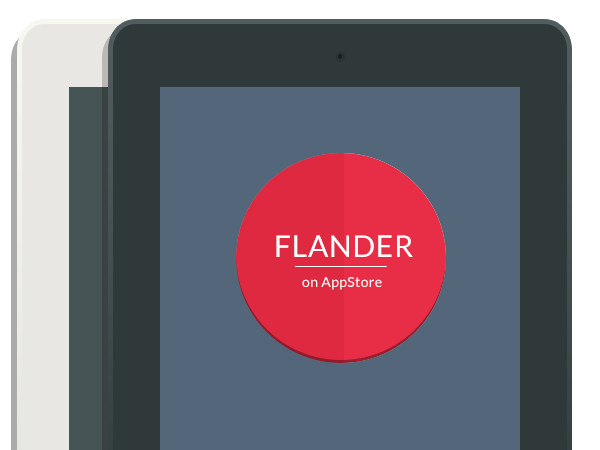
<style>
.page{position:relative;width:600px;height:450px;background:#54667a}
.page>*{position:absolute;margin:0}
.t1{font:30px "Lato-Regular";letter-spacing:0.025em;color:#fefefe}
.t2{font:14px "Lato-Regular";letter-spacing:0.025em;color:#fefefe}
</style>
<div class="page">
<p class="t1" style="left:276px;top:235px;width:137px;height:22px">FLANDER</p>
<p class="t2" style="left:302px;top:277px;width:80px;height:13px">on AppStore</p>
</div>
